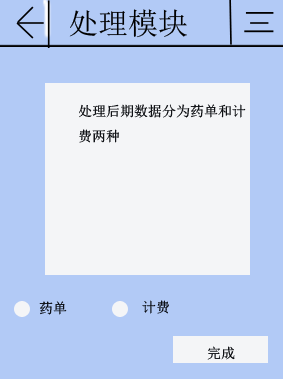
<style>
.page{position:relative;width:283px;height:379px;background:#b2caf6}
.page>*{position:absolute;margin:0}
.t1{font:30.1px "SimSun";color:#000000}
.t2{font:14px "SimSun";color:#000206}
.t3{font:14px "SimSun"}
</style>
<div class="page">
<p class="t1" style="left:69px;top:9px;width:118px;height:29px">处理模块</p>
<p class="t2" style="left:79px;top:104px;width:167px;height:39px">处理后期数据分为药单和计<br>费两种</p>
<p class="t3" style="left:39px;top:301px;width:28px;height:14px">药单</p>
<p class="t2" style="left:142px;top:300px;width:27px;height:14px">计费</p>
<p class="t2" style="left:207px;top:346px;width:28px;height:14px">完成</p>
</div>
